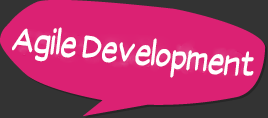
<style>
.page{position:relative;width:268px;height:118px;background:#db2173}
.page>*{position:absolute;margin:0}
.t1{font:35.8px "SuplexmentaryComicNC";color:#ffffff;scale:0.8 1}
</style>
<div class="page">
<p class="t1" style="left:12px;top:27px;width:242px;height:51px;rotate:7deg">Agile Development</p>
</div>
